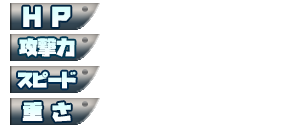
<style>
.page{position:relative;width:297px;height:128px;background:#ffffff}
.page>*{position:absolute;margin:0}
.t1{font:22px "GN-KMBFont-UB-NewstyleKanaB";color:#e8fffe}
.t2{font:18.4px "GN-KMBFont-UB-NewstyleKanaB";color:#e8fffe}
.t3{font:17px "GN-KMBFont-UB-NewstyleKanaB";color:#e8fffe}
.t4{font:19.6px "GN-KMBFont-UB-NewstyleKanaB";color:#eafffe}
</style>
<div class="page">
<p class="t1" style="left:23px;top:6px;width:48px;height:21px">H P</p>
<p class="t2" style="left:19px;top:38px;width:56px;height:19px">攻撃力</p>
<p class="t3" style="left:17px;top:71px;width:59px;height:18px">スピード</p>
<p class="t4" style="left:22px;top:102px;width:49px;height:20px">重 さ</p>
</div>
